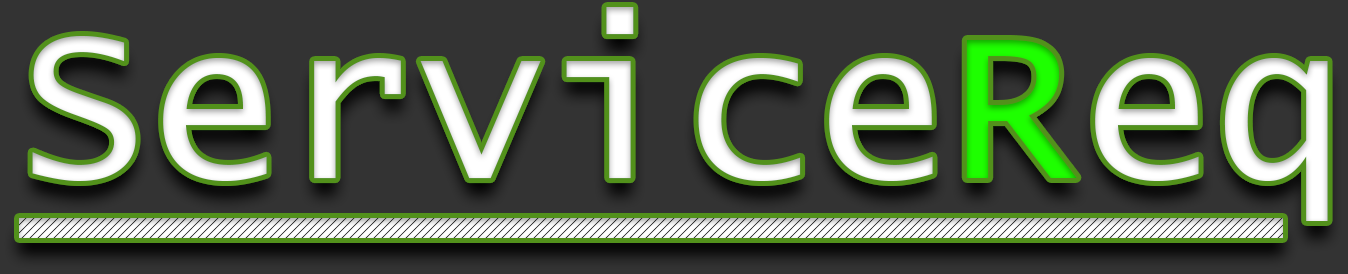
<style>
.page{position:relative;width:1348px;height:274px;background:#333333}
.page>*{position:absolute;margin:0}
.t1{font:221px "LucidaConsole";color:#ffffff}
.t2{font:221px "LucidaConsole";color:#1eff00}
</style>
<div class="page">
<p class="t1" style="left:32px;top:7px;width:1296px;height:214px">Service<span class="t2">R</span>eq</p>
</div>
